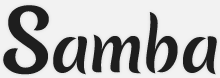
<style>
.page{position:relative;width:220px;height:78px;background:#f2f2f2}
.page>*{position:absolute;margin:0}
.t1{font:63px "MeriendaOne-Regular";letter-spacing:-0.05em;color:#1e1e1e}
.t2{font:82.5px "MeriendaOne-Regular";letter-spacing:-0.025em;color:#1e1e1e}
.t3{font:63px "MeriendaOne-Regular";letter-spacing:-0.01em;color:#1e1e1e}
</style>
<div class="page">
<p class="t1" style="left:3px;top:5px;width:214px;height:70px"><span class="t2">S</span>am<span class="t3">ba</span></p>
</div>
